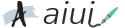
<style>
.page{position:relative;width:125px;height:28px;background:#ffffff}
.page>*{position:absolute;margin:0}
.t1{font:33px "Nunito-Light";color:#2c2c2c;font-style:italic}
</style>
<div class="page">
<p class="t1" style="left:43px;top:1px;width:52px;height:23px">aiui</p>
</div>
